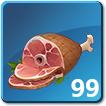
<style>
.page{position:relative;width:106px;height:106px}
.page>*{position:absolute;margin:0}
.t1{font:24px "MicrosoftYaHei-Bold";color:#ffffff}
</style>
<div class="page">
<p class="t1" style="left:71px;top:79px;width:28px;height:18px">99</p>
</div>
